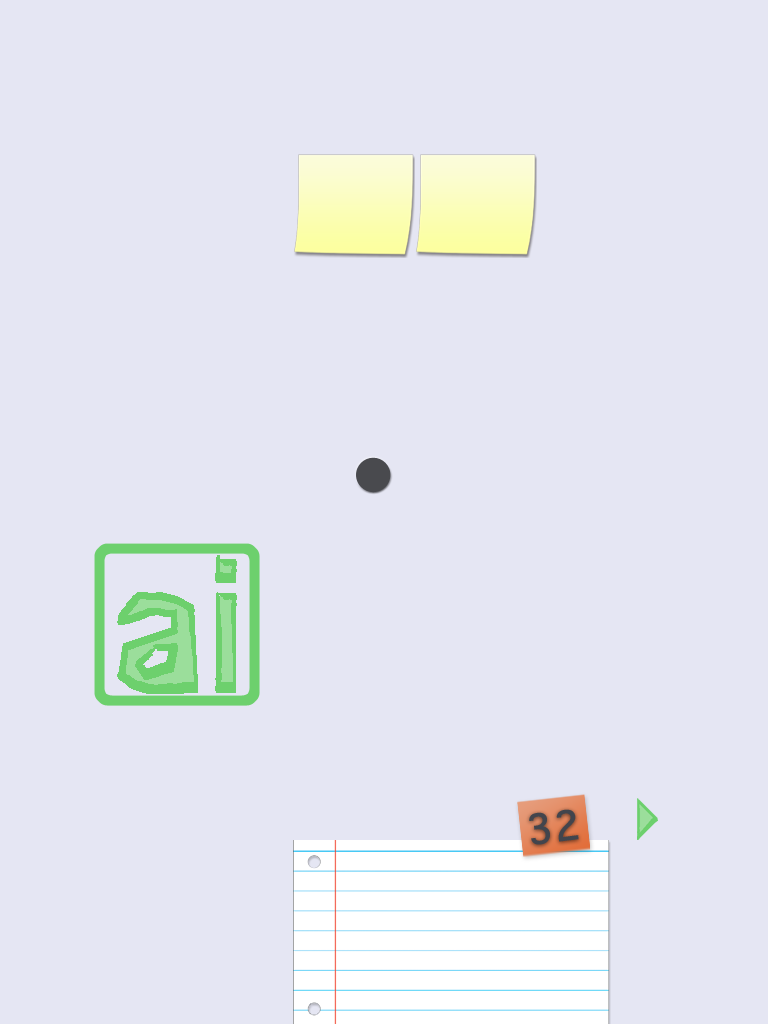
<style>
.page{position:relative;width:768px;height:1024px;background:#e5e6f3}
.page>*{position:absolute;margin:0}
.t1{font:40px "Thonburi-Bold";color:#42454d}
</style>
<div class="page">
<p class="t1" style="left:529px;top:809px;width:50px;height:36px;rotate:-7deg">32</p>
</div>
